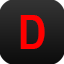
<style>
.page{position:relative;width:64px;height:64px}
.page>*{position:absolute;margin:0}
.t1{font:48px "ArialNarrow-Bold";color:#ff0000}
</style>
<div class="page">
<p class="t1" style="left:20px;top:15px;width:25px;height:34px">D</p>
</div>
